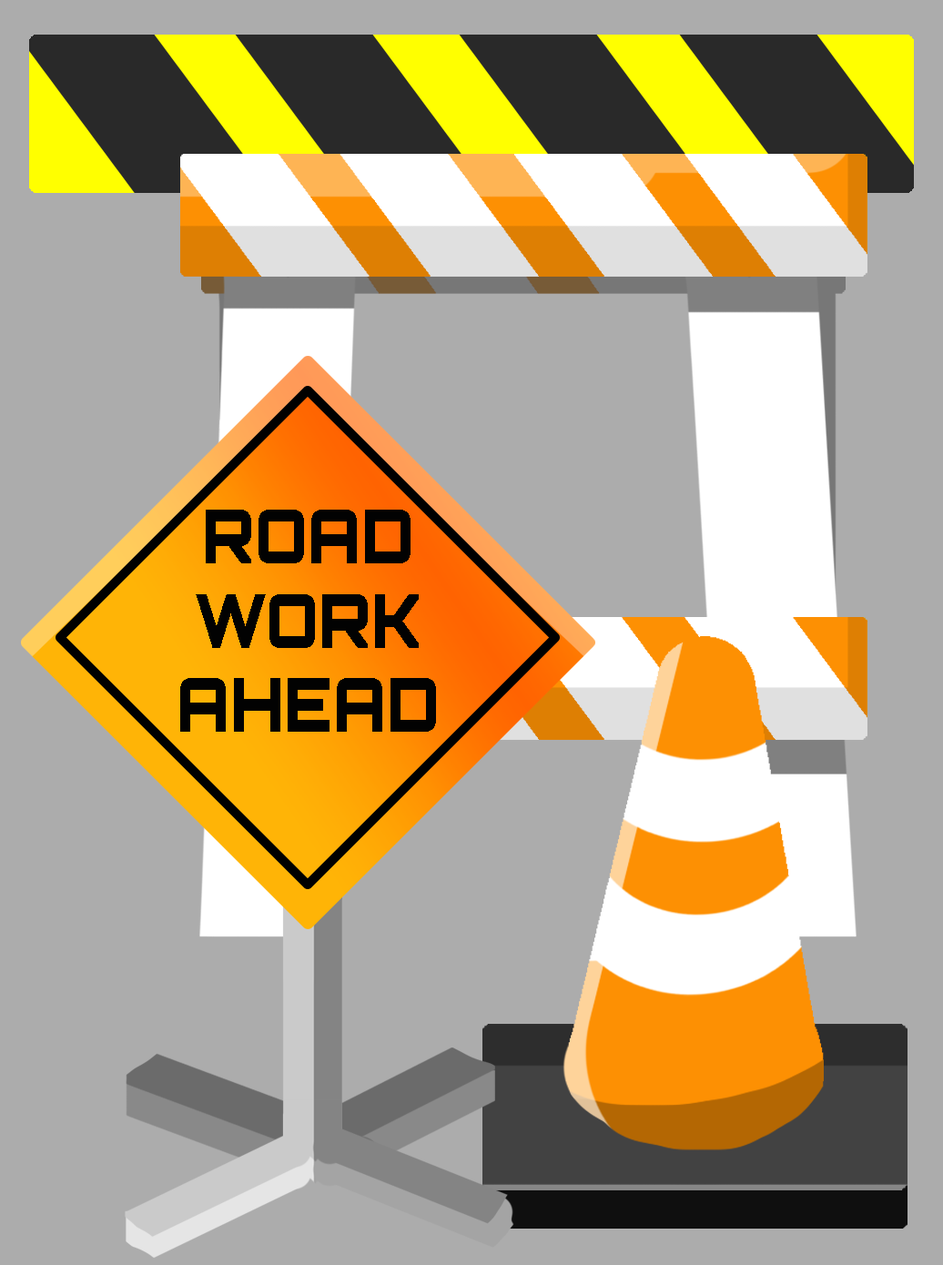
<style>
.page{position:relative;width:943px;height:1265px;background:#acacac}
.page>*{position:absolute;margin:0}
.t1{font:74.5px/84.2px "Orbitron-Black";letter-spacing:0.01em;color:#020202;font-variant:small-caps;scale:0.85 1}
</style>
<div class="page">
<p class="t1" style="left:180px;top:510px;width:256px;height:222px;text-align:center">ROAD<br>WORK<br>AHEAD</p>
</div>
